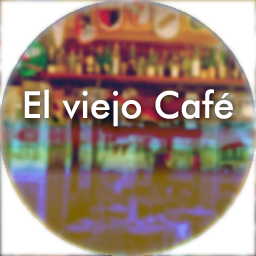
<style>
.page{position:relative;width:256px;height:256px}
.page>*{position:absolute;margin:0}
.t1{font:37.2px "FuturaBT-Medium";color:#ffffff}
</style>
<div class="page">
<p class="t1" style="left:24px;top:89px;width:209px;height:38px">El viejo Café</p>
</div>
